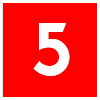
<style>
.page{position:relative;width:100px;height:100px;background:#ff0000}
.page>*{position:absolute;margin:0}
.t1{font:72px "ELEGANCE";color:#ffffff}
</style>
<div class="page">
<p class="t1" style="left:33px;top:23px;width:37px;height:53px">5</p>
</div>
